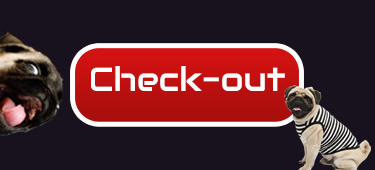
<style>
.page{position:relative;width:375px;height:170px;background:#18121e}
.page>*{position:absolute;margin:0}
.t1{font:33.3px "Audiowide-Regular";color:#ffffff}
</style>
<div class="page">
<p class="t1" style="left:91px;top:66px;width:194px;height:25px">Check-out</p>
</div>
